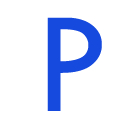
<style>
.page{position:relative;width:128px;height:128px;background:#ffffff}
.page>*{position:absolute;margin:0}
.t1{font:150px "TwCenMT-Regular";color:#1649dd}
</style>
<div class="page">
<p class="t1" style="left:47px;top:17px;width:55px;height:94px">P</p>
</div>
